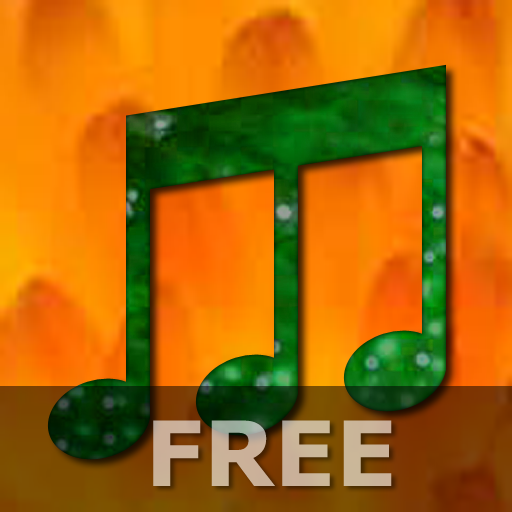
<style>
.page{position:relative;width:512px;height:512px}
.page>*{position:absolute;margin:0}
.t1{font:90px "Verdana-Bold";color:#cab199}
</style>
<div class="page">
<p class="t1" style="left:153px;top:420px;width:239px;height:66px">FREE</p>
</div>
